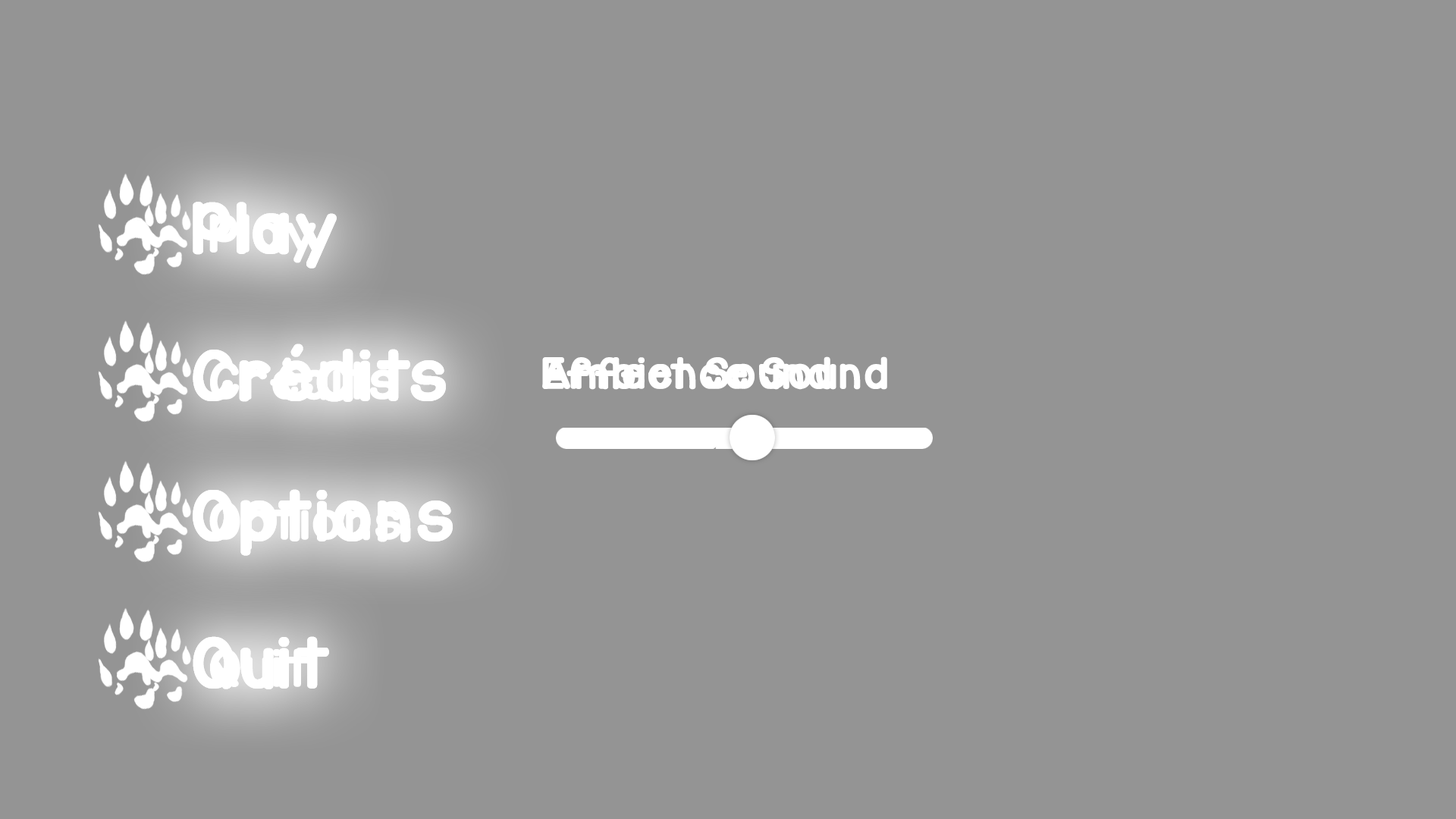
<style>
.page{position:relative;width:1456px;height:819px;background:#949494}
.page>*{position:absolute;margin:0}
.t1{font:56.9px "KGCorneroftheSky";color:#ffffff;font-weight:bold}
.t2{font:41.8px "KGCorneroftheSky";color:#ffffff;font-weight:bold}
.t3{font:34.8px "KGCorneroftheSky";color:#ffffff;font-weight:bold}
</style>
<div class="page">
<p class="t1" style="left:193px;top:202px;width:144px;height:66px">Play</p>
<p class="t1" style="left:193px;top:202px;width:144px;height:66px">Play</p>
<p class="t2" style="left:209px;top:214px;width:107px;height:49px">Play</p>
<p class="t1" style="left:193px;top:344px;width:253px;height:58px">Crédits</p>
<p class="t1" style="left:193px;top:344px;width:253px;height:58px">Crédits</p>
<p class="t2" style="left:210px;top:357px;width:186px;height:43px">Crédits</p>
<p class="t3" style="left:542px;top:356px;width:345px;height:34px">Ambience Sound</p>
<p class="t3" style="left:542px;top:356px;width:288px;height:34px">Effect Sound</p>
<p class="t1" style="left:193px;top:489px;width:260px;height:67px">Options</p>
<p class="t1" style="left:193px;top:489px;width:260px;height:67px">Options</p>
<p class="t2" style="left:209px;top:501px;width:192px;height:50px">Options</p>
<p class="t1" style="left:193px;top:636px;width:136px;height:53px">Quit</p>
<p class="t1" style="left:193px;top:636px;width:136px;height:53px">Quit</p>
<p class="t2" style="left:210px;top:648px;width:100px;height:40px">Quit</p>
</div>
